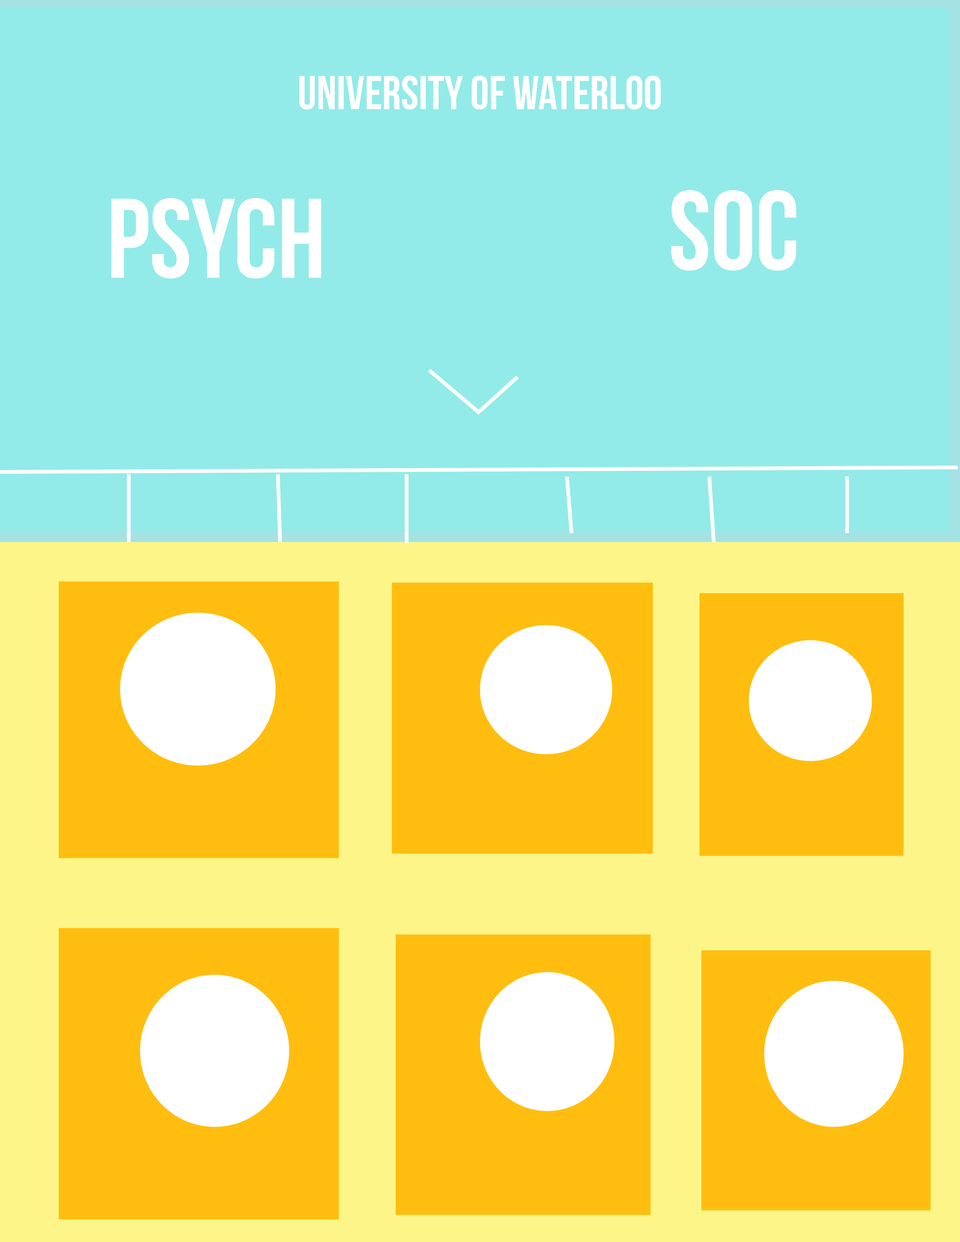
<style>
.page{position:relative;width:960px;height:1242px;background:#92ebe8}
.page>*{position:absolute;margin:0}
.t1{font:47.2px "BebasNeue";color:#ffffff}
.t2{font:112.9px "BebasNeue";color:#ffffff}
</style>
<div class="page">
<p class="t1" style="left:299px;top:76px;width:362px;height:34px">University of Waterloo</p>
<p class="t2" style="left:671px;top:190px;width:125px;height:81px">Soc</p>
<p class="t2" style="left:111px;top:198px;width:210px;height:81px">PSYCH</p>
</div>
